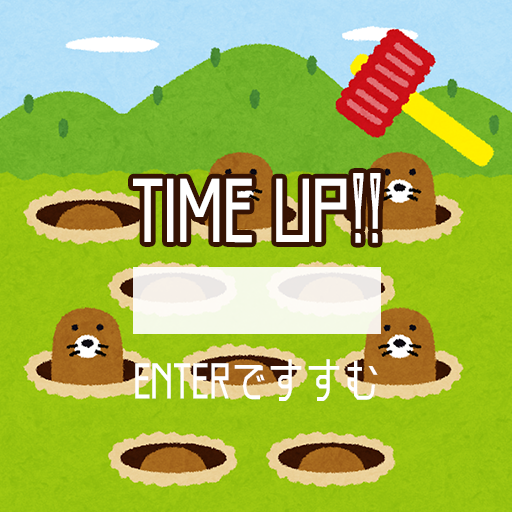
<style>
.page{position:relative;width:512px;height:512px}
.page>*{position:absolute;margin:0}
.t1{font:93.8px "Makinas-Flat-5";color:#ffffff;scale:0.8 1}
.t2{font:52.1px "Makinas-Flat-5";color:#ffffff;scale:0.8 1}
</style>
<div class="page">
<p class="t1" style="left:133px;top:173px;width:248px;height:70px">TIME UP!!</p>
<p class="t2" style="left:135px;top:359px;width:243px;height:42px">ENTERですすむ</p>
</div>
